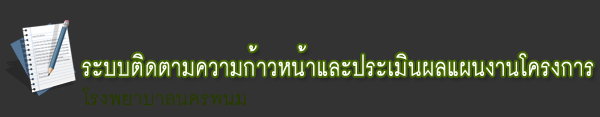
<style>
.page{position:relative;width:600px;height:117px;background:#333333}
.page>*{position:absolute;margin:0}
.t1{font:34.1px "DSEKaMon";color:#ffffff;font-weight:bold;scale:0.87 1}
.t2{font:27px "DSEKaMon";color:#263a00;font-weight:bold}
</style>
<div class="page">
<p class="t1" style="left:82px;top:45px;width:511px;height:31px">ระบบติดตามความก้าวหน้าและประเมินผลแผนงานโครงการ</p>
<p class="t2" style="left:82px;top:87px;width:164px;height:19px">โรงพยาบาลนครพนม</p>
</div>
